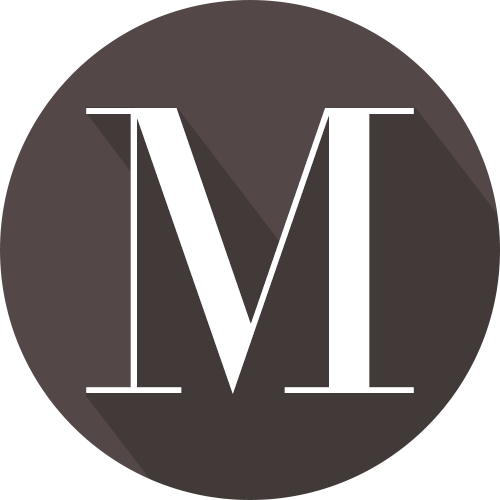
<style>
.page{position:relative;width:500px;height:500px;background:#423a39}
.page>*{position:absolute;margin:0}
.t1{font:400px "Didot";color:#ffffff}
</style>
<div class="page">
<p class="t1" style="left:86px;top:108px;width:328px;height:286px">M</p>
</div>
